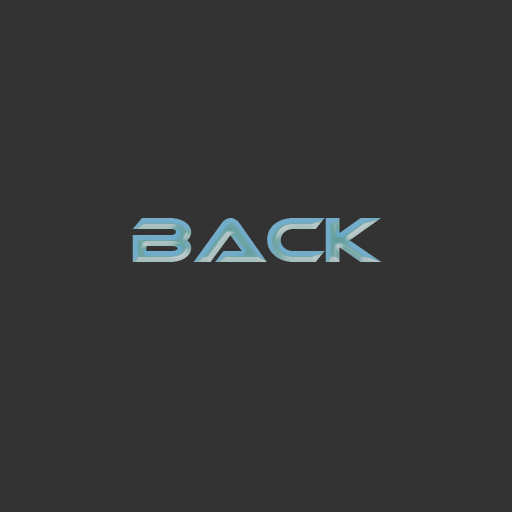
<style>
.page{position:relative;width:512px;height:512px;background:#333333}
.page>*{position:absolute;margin:0}
.t1{font:61.4px "Ethnocentric"}
</style>
<div class="page">
<p class="t1" style="left:132px;top:218px;width:250px;height:44px">Back</p>
</div>
